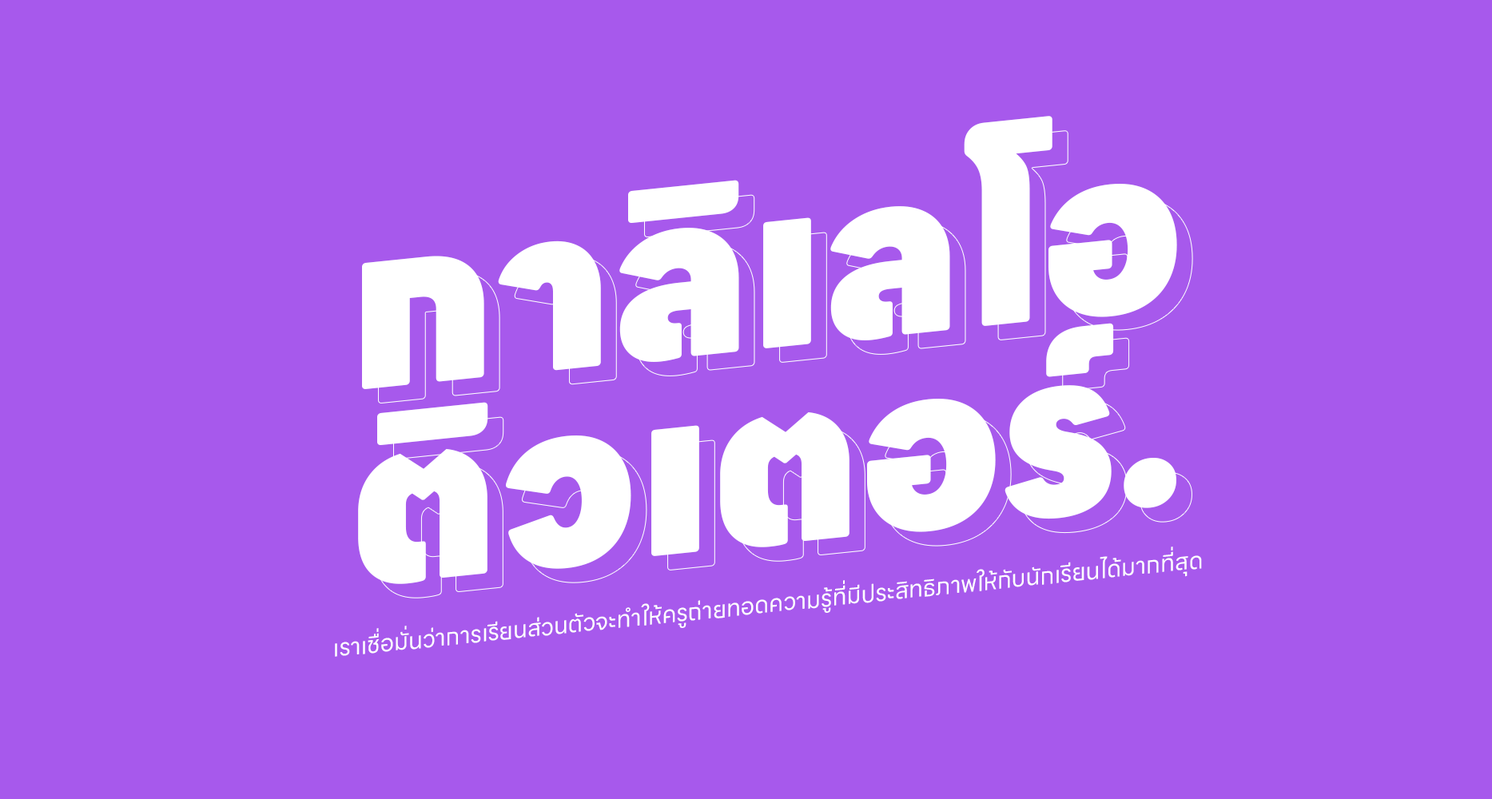
<style>
.page{position:relative;width:1492px;height:799px;background:#a759ec}
.page>*{position:absolute;margin:0}
.t1{font:213.1px/196.5px "LINESeedSansTH-Heavy";color:#ffffff}
.t2{font:23.3px "LINESeedSansTH-Regular";color:#ffffff}
</style>
<div class="page">
<p class="t1" style="left:358px;top:116px;width:819px;height:468px;text-align:center;rotate:-6deg">กาลิเลโอ<br>ติวเตอร์.</p>
<p class="t1" style="left:374px;top:130px;width:819px;height:469px;text-align:center;rotate:-6deg">กาลิเลโอ<br>ติวเตอร์.</p>
<p class="t2" style="left:335px;top:547px;width:867px;height:110px;rotate:-6deg">เราเชื่อมั่นว่าการเรียนส่วนตัวจะทำให้ครูถ่ายทอดความรู้ที่มีประสิทธิภาพให้กับนักเรียนได้มากที่สุด</p>
</div>
